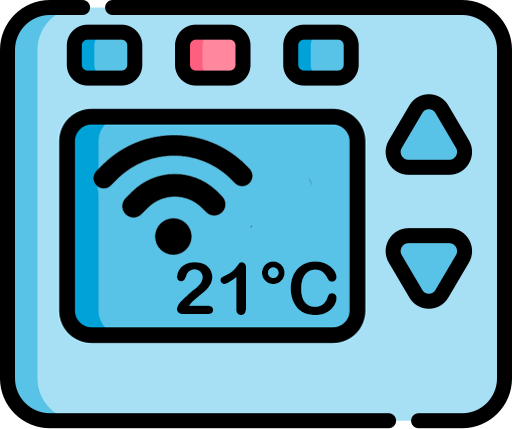
<style>
.page{position:relative;width:512px;height:429px;background:#a7e0f5}
.page>*{position:absolute;margin:0}
.t1{font:72px "ArialRoundedMTBold";color:#000000}
</style>
<div class="page">
<p class="t1" style="left:177px;top:261px;width:160px;height:54px">21°C</p>
</div>
